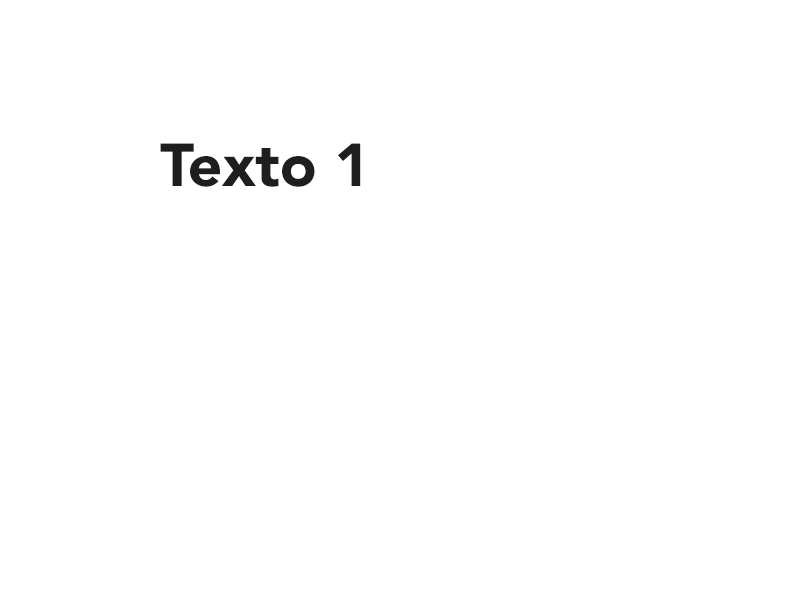
<style>
.page{position:relative;width:800px;height:600px;background:#ffffff}
.page>*{position:absolute;margin:0}
.t1{font:60px "AvenirLTStd-Black";color:#1e1e1e}
</style>
<div class="page">
<p class="t1" style="left:160px;top:143px;width:201px;height:44px">Texto 1</p>
</div>
